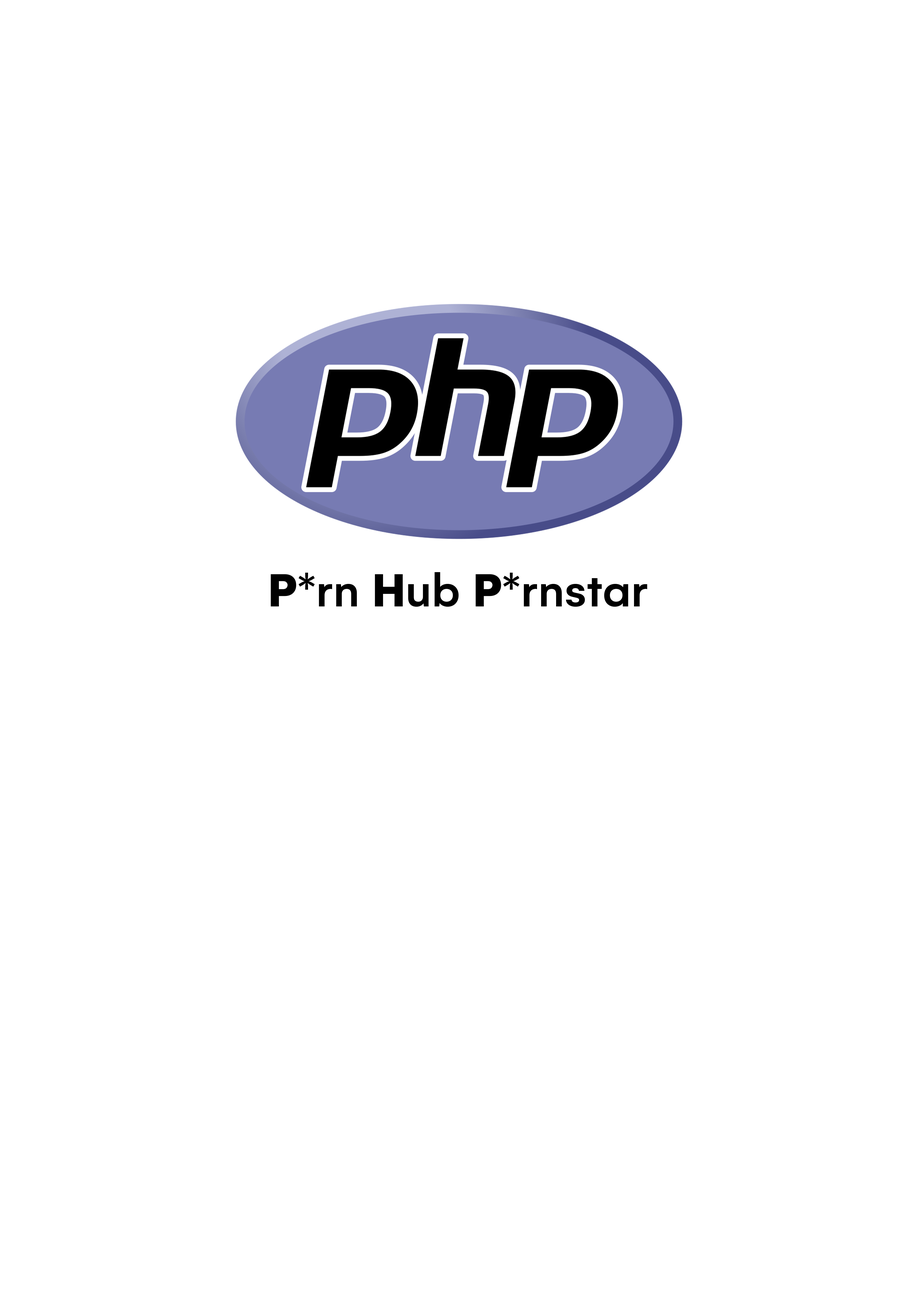
<style>
.page{position:relative;width:918px;height:1299px;background:#ffffff}
.page>*{position:absolute;margin:0}
.t1{font:50px "Gelion-Medium";color:#000000}
.t2{font:50px "Gelion-Black";color:#000000}
</style>
<div class="page">
<p class="t1" style="left:271px;top:572px;width:377px;height:34px"><span class="t2">P</span>*rn <span class="t2">H</span>ub <span class="t2">P</span>*rnstar</p>
</div>
